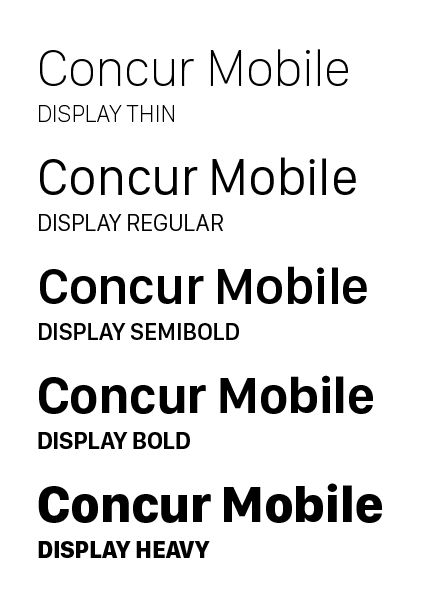
<style>
.page{position:relative;width:437px;height:606px;background:#ffffff}
.page>*{position:absolute;margin:0}
.t1{font:52px/62px "SanFranciscoDisplay-Thin";color:#000000}
.t2{font:24px/36px "SanFranciscoDisplay-Thin";color:#000000}
.t3{font:24px/36px "SanFranciscoDisplay-Regular";color:#000000}
.t4{font:52px/62px "SanFranciscoDisplay-Regular";color:#000000}
.t5{font:24px/36px "SanFranciscoDisplay-Semibold";color:#000000}
.t6{font:52px/62px "SanFranciscoDisplay-Semibold";color:#000000}
.t7{font:52px/62px "SanFranciscoDisplay-Bold";color:#000000}
.t8{font:24px/36px "SanFranciscoDisplay-Bold";color:#000000}
.t9{font:52px/62px "SanFranciscoDisplay-Heavy";color:#000000}
.t10{font:24px/36px "SanFranciscoDisplay-Heavy";color:#000000}
</style>
<div class="page">
<p class="t1" style="left:39px;top:49px;width:309px;height:73px">Concur Mobile<br><span class="t2">DISPLAY THIN</span></p>
<p class="t3" style="left:39px;top:157px;width:317px;height:74px"><span class="t4">Concur Mobile<br></span>DISPLAY REGULAR</p>
<p class="t5" style="left:39px;top:266px;width:328px;height:74px"><span class="t6">Concur Mobile<br></span>DISPLAY SEMIBOLD</p>
<p class="t7" style="left:38px;top:375px;width:335px;height:74px">Concur Mobile<br><span class="t8">DISPLAY BOLD</span></p>
<p class="t9" style="left:38px;top:483px;width:344px;height:75px">Concur Mobile<br><span class="t10">DISPLAY HEAVY</span></p>
</div>
